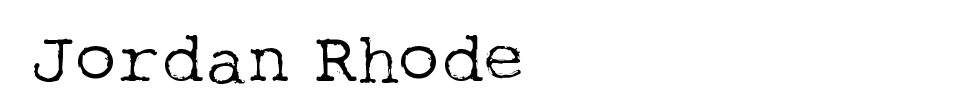
<style>
.page{position:relative;width:960px;height:100px;background:#ffffff}
.page>*{position:absolute;margin:0}
.t1{font:72px "RoughTypewriter";color:#000000}
</style>
<div class="page">
<p class="t1" style="left:34px;top:35px;width:487px;height:49px">Jordan Rhode</p>
</div>
